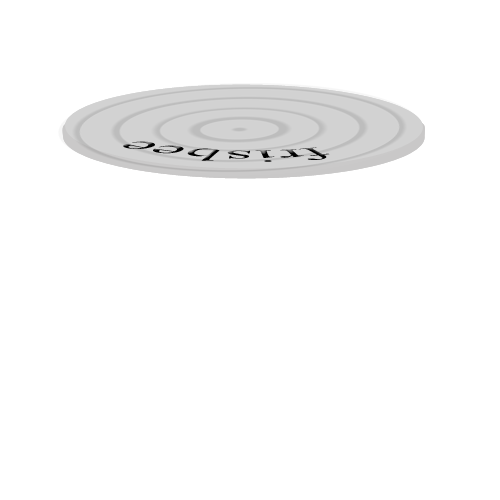
<style>
.page{position:relative;width:500px;height:500px;background:#ffffff}
.page>*{position:absolute;margin:0}
.t1{font:16.8px "TimesNewRomanPSMT";color:#000000;scale:4.28 1}
</style>
<div class="page">
<p class="t1" style="left:123px;top:141px;width:207px;height:21px">frisbee</p>
</div>
